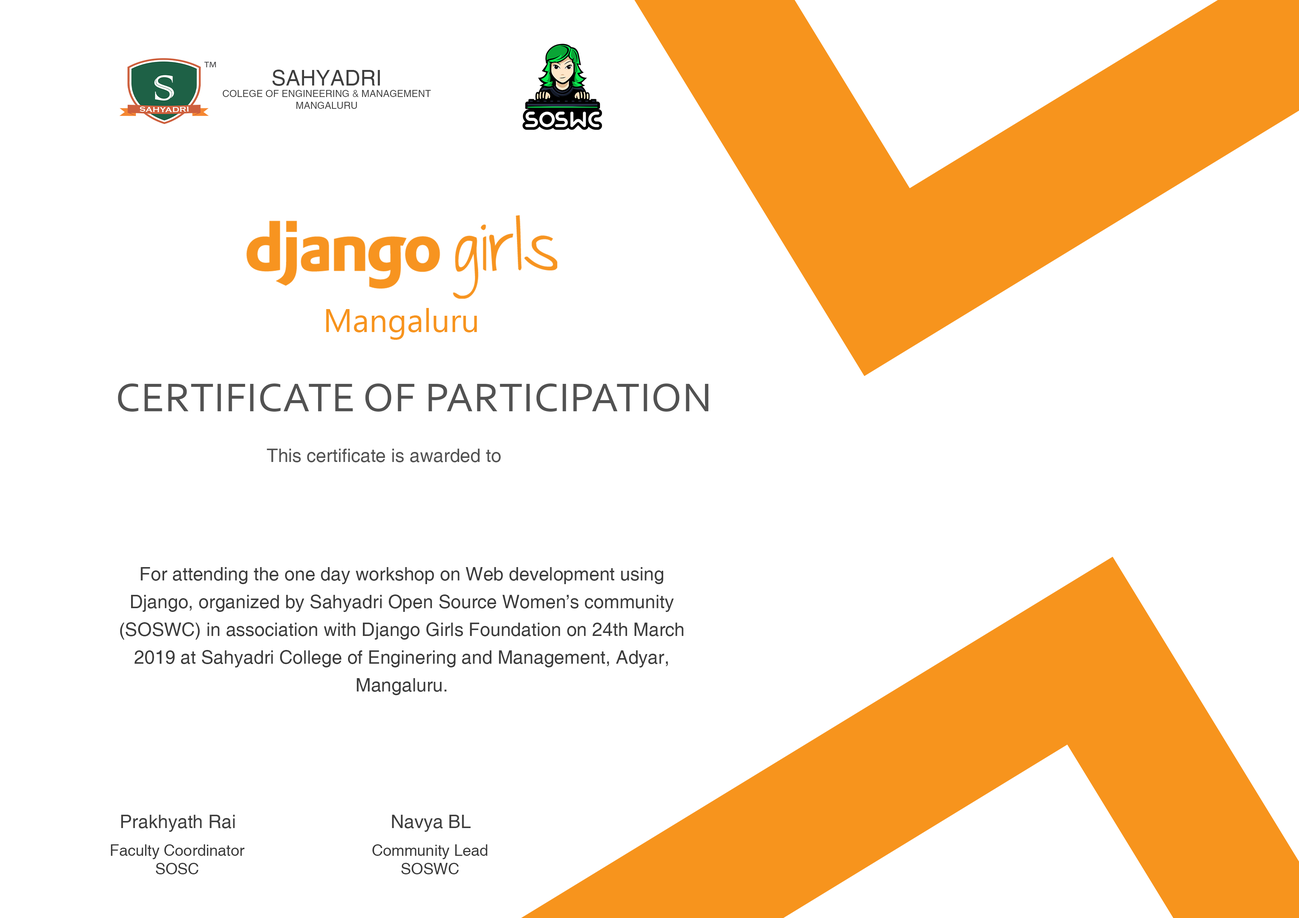
<style>
.page{position:relative;width:1299px;height:918px;background:#ffffff}
.page>*{position:absolute;margin:0}
.t1{font:9.7px "Helvetica";color:#3e3e3e}
.t2{font:21.6px "Helvetica";color:#3e3e3e}
.t3{font:32.6px "SegoeUI";color:#f7941d}
.t4{font:42.3px "Corbel";letter-spacing:0.01em;color:#525252}
.t5{font:18.5px "Helvetica";color:#525252}
.t6{font:18.5px/27.8px "Helvetica";color:#3c3c3c}
.t7{font:18.5px "Helvetica";color:#3e3e3e}
.t8{font:15.4px "Helvetica";color:#393939}
</style>
<div class="page">
<p class="t1" style="left:223px;top:70px;width:208px;height:39px;text-align:center"><span class="t2">SAHYADRI<br></span>COLEGE OF ENGINEERING &amp; MANAGEMENT<br>MANGALURU</p>
<p class="t3" style="left:326px;top:308px;width:151px;height:32px">Mangaluru</p>
<p class="t4" style="left:118px;top:384px;width:590px;height:28px">CERTIFICATE OF PARTICIPATION</p>
<p class="t5" style="left:267px;top:449px;width:234px;height:13px">This certificate is awarded to</p>
<p class="t6" style="left:120px;top:567px;width:563px;height:128px;text-align:center">For attending the one day workshop on Web development using Django, organized by Sahyadri Open Source Women’s community (SOSWC) in association with Django Girls Foundation on 24th March 2019 at Sahyadri College of Enginering and Management, Adyar, Mangaluru.</p>
<p class="t7" style="left:121px;top:815px;width:114px;height:17px">Prakhyath Rai</p>
<p class="t7" style="left:392px;top:815px;width:79px;height:17px">Navya BL</p>
<p class="t8" style="left:111px;top:844px;width:133px;height:30px;text-align:center">Faculty Coordinator<br>SOSC</p>
<p class="t8" style="left:372px;top:844px;width:115px;height:30px;text-align:center">Community Lead<br>SOSWC</p>
</div>
